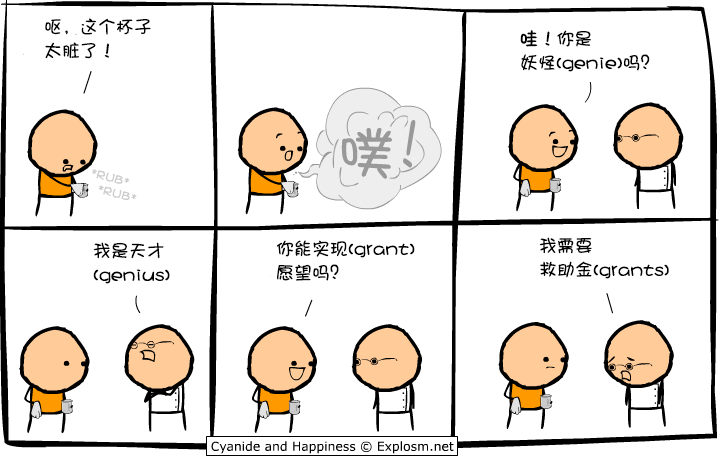
<style>
.page{position:relative;width:720px;height:465px;background:#ffffff}
.page>*{position:absolute;margin:0}
.t1{font:18px/24px "DFPShaoNvW5";color:#000000}
.t2{font:18px/24px "DFPShaoNvW5";color:#000000;font-weight:bold}
.t3{font:58px "DFPShaoNvW5";letter-spacing:-0.12em;color:#999999}
.t4{font:55.6px "DFPShaoNvW5";letter-spacing:-0.14em;color:#999999;scale:0.72 1}
</style>
<div class="page">
<p class="t1" style="left:45px;top:18px;width:106px;height:41px">呕，这个杯子<br>太脏了！</p>
<p class="t1" style="left:520px;top:30px;width:130px;height:42px"><span class="t2">哇</span>！你是<br>妖怪(genie)吗？</p>
<p class="t3" style="left:341px;top:120px;width:75px;height:59px">噗<span class="t4">！</span></p>
<p class="t1" style="left:93px;top:242px;width:77px;height:42px">我是天才<br>(genius)</p>
<p class="t1" style="left:276px;top:240px;width:139px;height:41px">你能实现(grant)<br>愿望吗？</p>
<p class="t1" style="left:539px;top:237px;width:130px;height:42px">我需要<br>救助金(grants)</p>
</div>
